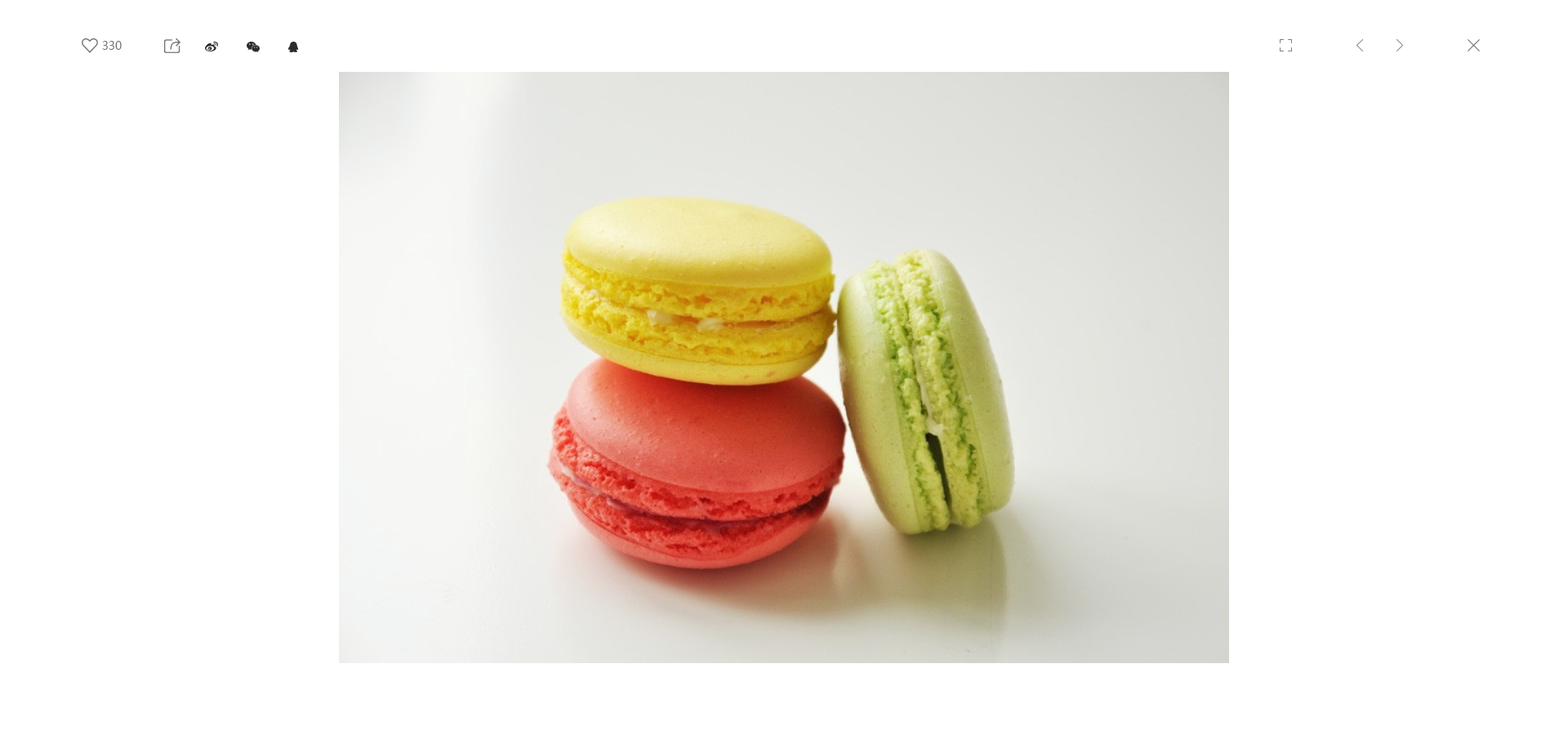
<style>
.page{position:relative;width:1568px;height:735px;background:#ffffff}
.page>*{position:absolute;margin:0}
.t1{font:11.4px "MicrosoftYaHei";color:#6f6f6e}
</style>
<div class="page">
<p class="t1" style="left:102px;top:41px;width:20px;height:9px">330</p>
</div>
